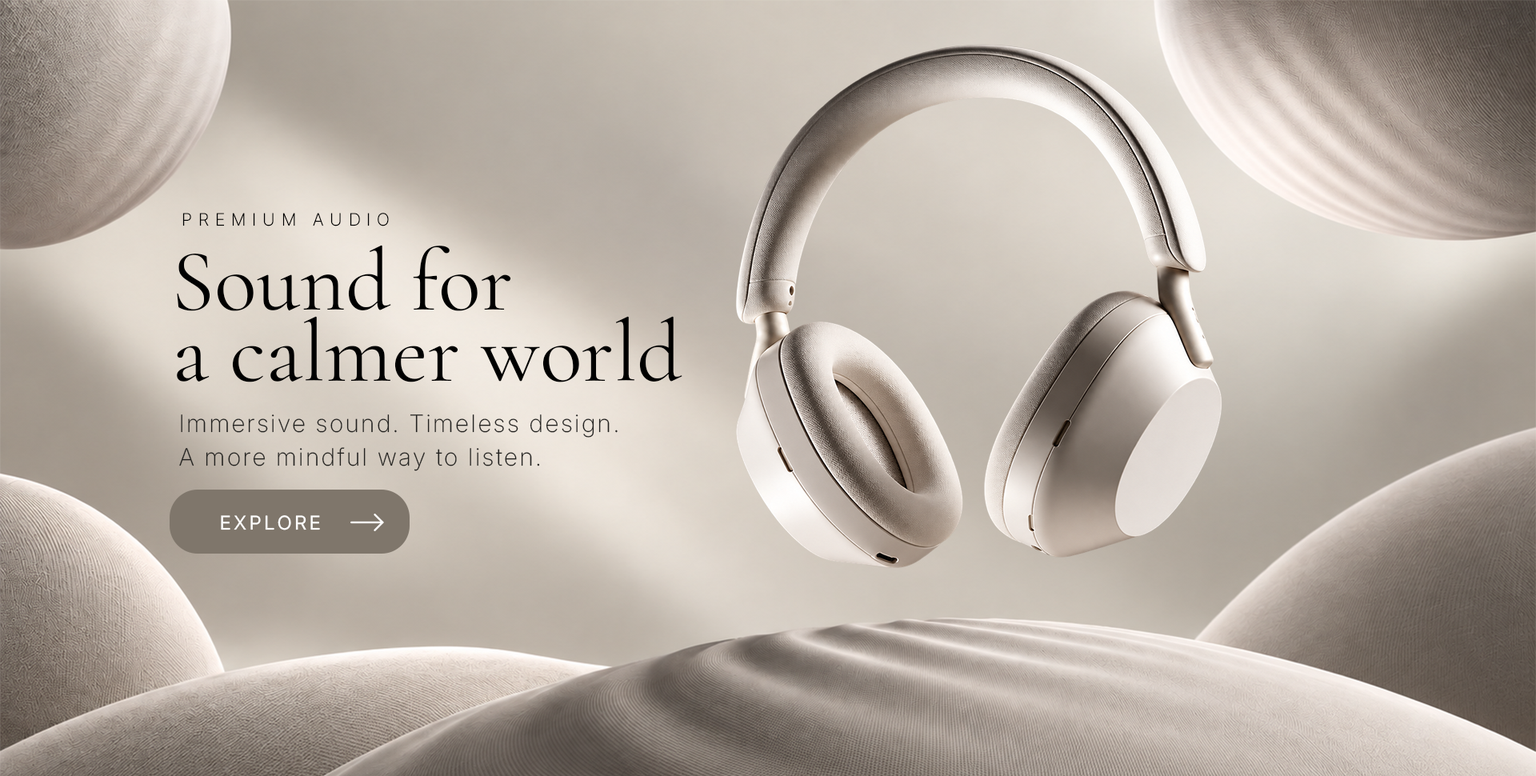
<style>
.page{position:relative;width:1536px;height:776px}
.page>*{position:absolute;margin:0}
.t1{font:17.6px "Pretendard-ExtraLight";letter-spacing:0.36em;color:#000000}
.t2{font:88px "CormorantGaramond-Regular";color:#000000}
.t3{font:24px "Inter18pt-ExtraLight";letter-spacing:0.08em;color:#22211f}
.t4{font:19.2px "Inter18pt-Regular";letter-spacing:0.14em;color:#ffffff}
</style>
<div class="page">
<p class="t1" style="left:182px;top:213px;width:207px;height:13px">PREMIUM AUDIO</p>
<p class="t2" style="left:177px;top:245px;width:334px;height:66px">Sound for</p>
<p class="t2" style="left:177px;top:316px;width:506px;height:66px">a calmer world</p>
<p class="t3" style="left:181px;top:414px;width:437px;height:24px">Immersive sound. Timeless design.</p>
<p class="t3" style="left:179px;top:447px;width:361px;height:24px">A more mindful way to listen.</p>
<p class="t4" style="left:221px;top:515px;width:99px;height:16px">EXPLORE</p>
</div>
